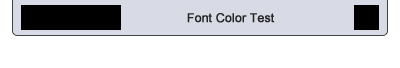
<style>
.page{position:relative;width:400px;height:68px;background:#ffffff}
.page>*{position:absolute;margin:0}
.t1{font:12px "ArialMT";color:#232323;font-weight:bold}
</style>
<div class="page">
<p class="t1" style="left:187px;top:13px;width:88px;height:10px">Font Color Test</p>
</div>
